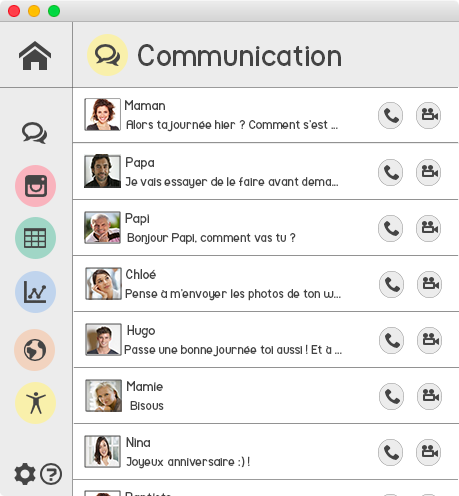
<style>
.page{position:relative;width:459px;height:496px;background:#ffffff}
.page>*{position:absolute;margin:0}
.t1{font:30px "Mockup-Regular";color:#444444}
.t2{font:13px "Mockup-Regular";color:#444444}
.t3{font:12px "Mockup-Regular";color:#444444}
</style>
<div class="page">
<p class="t1" style="left:138px;top:44px;width:203px;height:22px">Communication</p>
<p class="t2" style="left:125px;top:100px;width:40px;height:10px">Maman</p>
<p class="t3" style="left:126px;top:120px;width:212px;height:12px">Alors ta journée hier ? Comment s’est ...</p>
<p class="t2" style="left:126px;top:157px;width:28px;height:13px">Papa</p>
<p class="t3" style="left:125px;top:177px;width:213px;height:12px">Je vais essayer de le faire avant dema...</p>
<p class="t2" style="left:125px;top:213px;width:24px;height:13px">Papi</p>
<p class="t3" style="left:127px;top:233px;width:169px;height:12px">Bonjour Papi, comment vas tu ?</p>
<p class="t2" style="left:126px;top:269px;width:30px;height:10px">Chloé</p>
<p class="t3" style="left:125px;top:289px;width:216px;height:12px">Pense à m’envoyer les photos de ton w...</p>
<p class="t2" style="left:127px;top:325px;width:28px;height:13px">Hugo</p>
<p class="t3" style="left:124px;top:344px;width:218px;height:13px">Passe une bonne journée toi aussi ! Et à ...</p>
<p class="t2" style="left:127px;top:381px;width:36px;height:10px">Mamie</p>
<p class="t3" style="left:130px;top:401px;width:34px;height:9px">Bisous</p>
<p class="t2" style="left:126px;top:437px;width:24px;height:10px">Nina</p>
<p class="t3" style="left:126px;top:456px;width:124px;height:13px">Joyeux anniversaire :) !</p>
</div>
